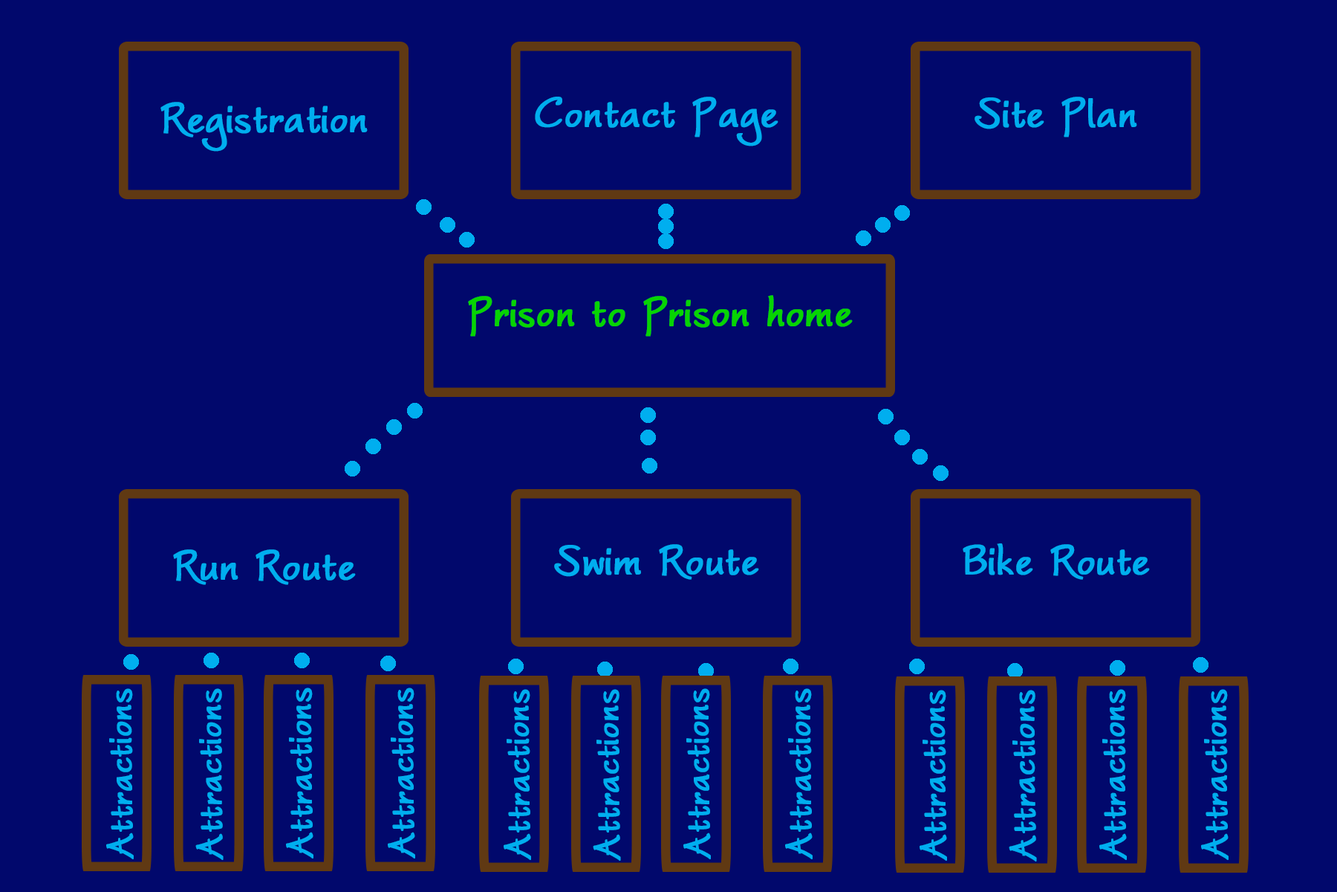
<style>
.page{position:relative;width:1337px;height:892px;background:#01086c}
.page>*{position:absolute;margin:0}
.t1{font:55.7px "WorstveldSlingBold";color:#00aeef;font-weight:bold}
.t2{font:55.7px "WorstveldSlingBold";color:#07d402;font-weight:bold}
.t3{font:47.7px "WorstveldSlingBold";color:#00aeef;font-weight:bold}
.t4{font:47.5px "WorstveldSlingBold";color:#00aeef;font-weight:bold}
</style>
<div class="page">
<p class="t1" style="left:160px;top:102px;width:208px;height:50px">Registration</p>
<p class="t1" style="left:535px;top:97px;width:244px;height:49px">Contact Page</p>
<p class="t1" style="left:975px;top:97px;width:163px;height:40px">Site Plan</p>
<p class="t2" style="left:468px;top:295px;width:385px;height:42px">Prison to Prison home</p>
<p class="t1" style="left:554px;top:544px;width:205px;height:36px">Swim Route</p>
<p class="t1" style="left:963px;top:543px;width:187px;height:37px">Bike Route</p>
<p class="t1" style="left:173px;top:549px;width:183px;height:36px">Run Route</p>
<p class="t3" style="left:106px;top:688px;width:28px;height:171px;rotate:-90deg">Attractions</p>
<p class="t4" style="left:195px;top:688px;width:29px;height:172px;rotate:-90deg">Attractions</p>
<p class="t3" style="left:286px;top:687px;width:28px;height:171px;rotate:-90deg">Attractions</p>
<p class="t3" style="left:388px;top:687px;width:27px;height:171px;rotate:-90deg">Attractions</p>
<p class="t3" style="left:504px;top:689px;width:27px;height:171px;rotate:-90deg">Attractions</p>
<p class="t4" style="left:593px;top:689px;width:28px;height:171px;rotate:-90deg">Attractions</p>
<p class="t3" style="left:684px;top:688px;width:27px;height:171px;rotate:-90deg">Attractions</p>
<p class="t3" style="left:785px;top:688px;width:28px;height:171px;rotate:-90deg">Attractions</p>
<p class="t3" style="left:920px;top:690px;width:27px;height:170px;rotate:-90deg">Attractions</p>
<p class="t4" style="left:1009px;top:690px;width:28px;height:171px;rotate:-90deg">Attractions</p>
<p class="t3" style="left:1100px;top:689px;width:27px;height:171px;rotate:-90deg">Attractions</p>
<p class="t3" style="left:1201px;top:689px;width:28px;height:171px;rotate:-90deg">Attractions</p>
</div>
